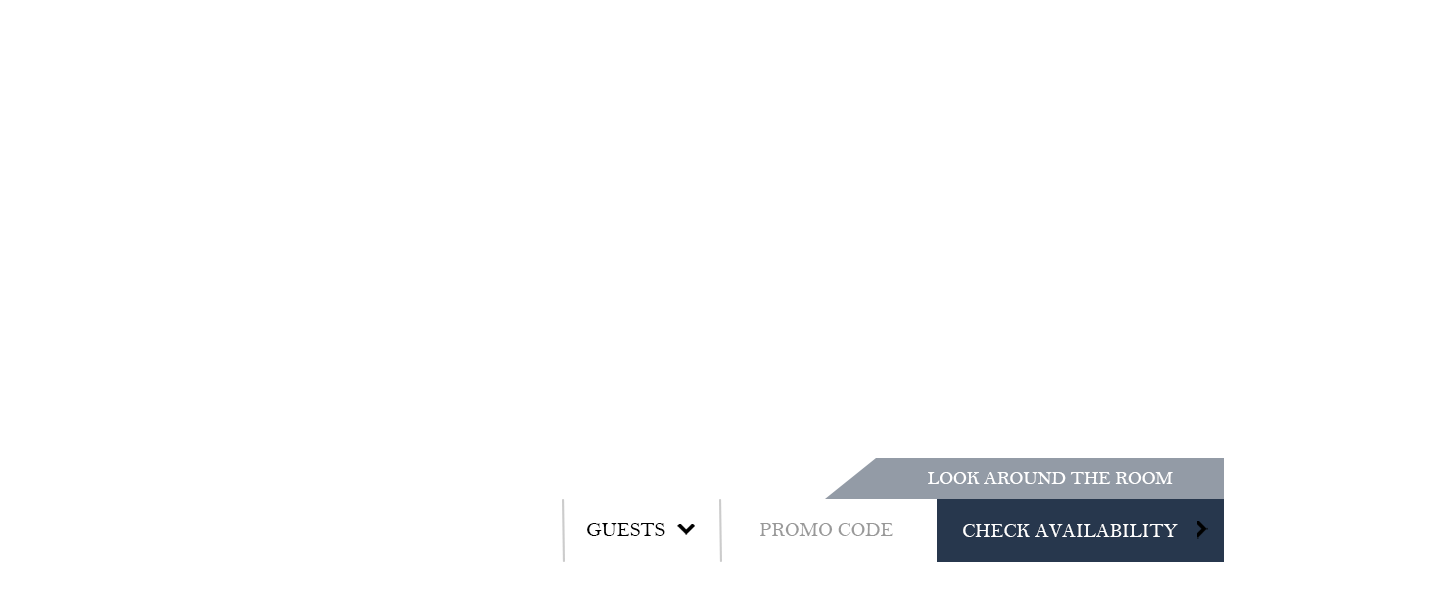
<style>
.page{position:relative;width:1440px;height:600px;background:#ffffff}
.page>*{position:absolute;margin:0}
.t1{font:18.8px "BellMT";color:#ffffff}
.t2{font:20px "BellMT";color:#000000}
.t3{font:20px "BellMT";color:#999999}
.t4{font:20px "BellMT";color:#ffffff}
</style>
<div class="page">
<p class="t1" style="left:928px;top:472px;width:245px;height:12px">LOOK AROUND THE ROOM</p>
<p class="t2" style="left:587px;top:523px;width:78px;height:13px">GUESTS</p>
<p class="t3" style="left:760px;top:523px;width:133px;height:13px">PROMO CODE</p>
<p class="t4" style="left:963px;top:524px;width:215px;height:13px">CHECK AVAILABILITY</p>
</div>
